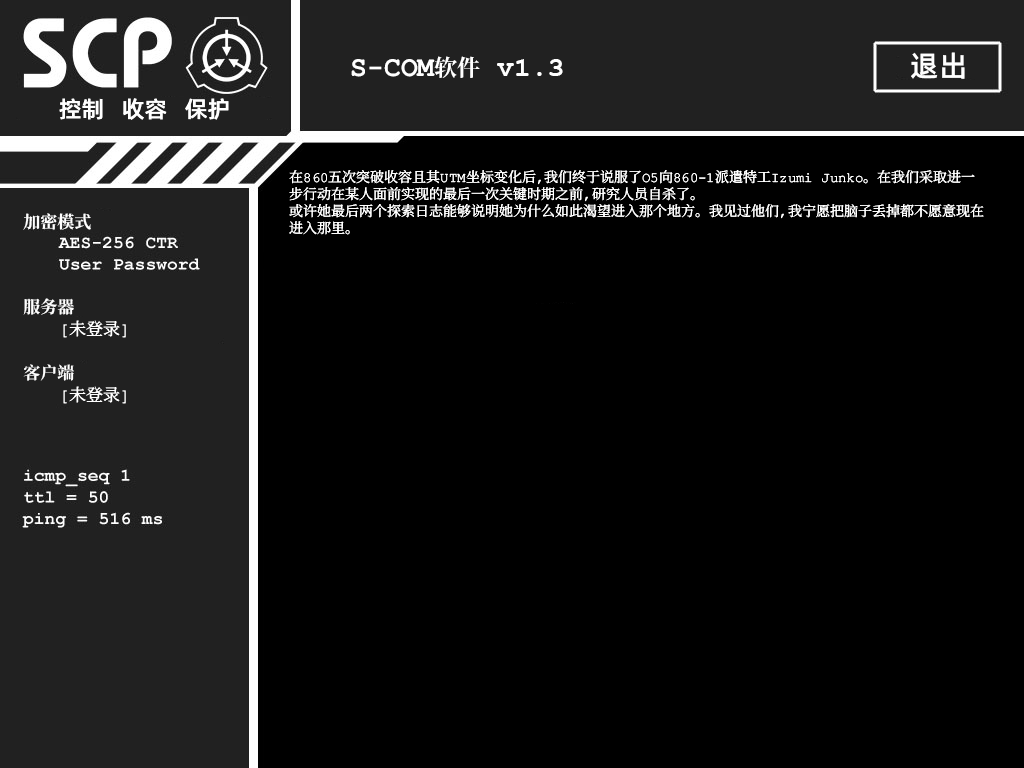
<style>
.page{position:relative;width:1024px;height:768px;background:#000000}
.page>*{position:absolute;margin:0}
.t1{font:29px "AlibabaPuHuiTiM";color:#ffffff}
.t2{font:28px "ContainmentBreach-Bold";color:#ffffff}
.t3{font:23px "ContainmentBreach-Bold";color:#ffffff}
.t4{font:28px "CourierNewPS-BoldMT";color:#ffffff}
.t5{font:23px "AlibabaPuHuiTiM";color:#ffffff}
.t6{font:14px/17px "ContainmentBreach-Regular";color:#ffffff}
.t7{font:17px/18px "ContainmentBreach-Regular";color:#ffffff}
.t8{font:17px/17px "ContainmentBreach-Bold";color:#ffffff}
.t9{font:17px/22px "ContainmentBreach-Bold";color:#ffffff}
.t10{font:17px/22px "ContainmentBreach-Regular";color:#ffffff}
</style>
<div class="page">
<p class="t1" style="left:911px;top:52px;width:54px;height:27px">退出</p>
<p class="t2" style="left:351px;top:56px;width:212px;height:22px">S-COM<span class="t3">软件 </span><span class="t4">v1.3</span></p>
<p class="t5" style="left:59px;top:98px;width:170px;height:22px">控制   收容   保护</p>
<p class="t6" style="left:289px;top:170px;width:695px;height:65px">在860五次突破收容且其UTM坐标变化后，我们终于说服了O5向860-1派遣特工Izumi Junko。在我们采取进一<br>步行动在某人面前实现的最后一次关键时期之前，研究人员自杀了。<br>或许她最后两个探索日志能够说明她为什么如此渴望进入那个地方。我见过他们，我宁愿把脑子丢掉都不愿意现在<br>进入那里。</p>
<p class="t7" style="left:23px;top:213px;width:103px;height:191px"><span class="t8">加密模式<br><br><br><br><br></span><span class="t9">服务器<br> </span>[未登录]<br><br><span class="t9">客户端<br> </span><span class="t10">[未登录]</span></p>
</div>
